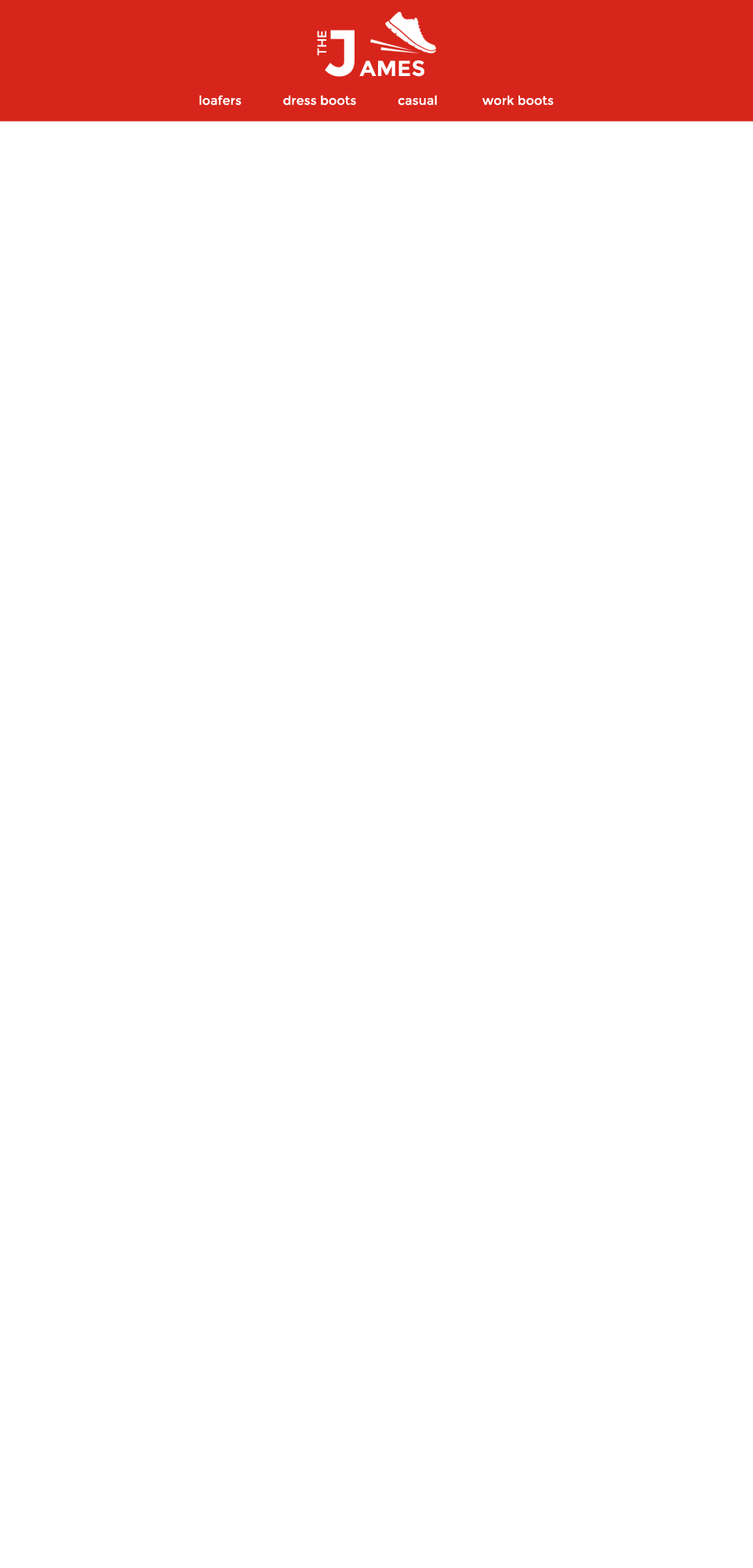
<style>
.page{position:relative;width:753px;height:1568px;background:#ffffff}
.page>*{position:absolute;margin:0}
.t1{font:12.5px "Montserrat-Regular";color:#ffffff}
</style>
<div class="page">
<p class="t1" style="left:199px;top:95px;width:355px;height:10px">loafers            dress boots            casual             work boots</p>
</div>
